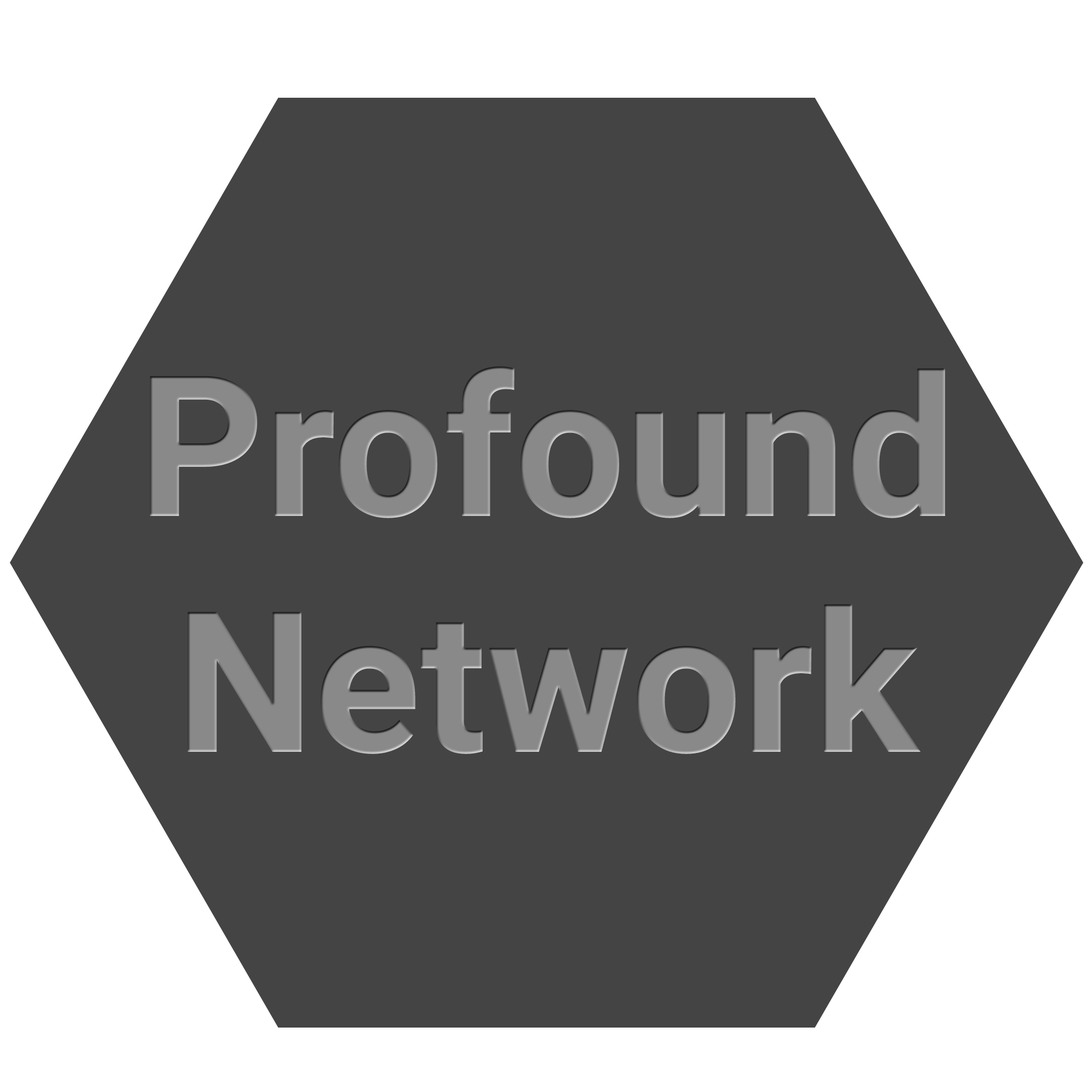
<style>
.page{position:relative;width:1092px;height:1092px;background:#444444}
.page>*{position:absolute;margin:0}
.t1{font:196.7px "Roboto-Bold";color:#898989}
</style>
<div class="page">
<p class="t1" style="left:150px;top:366px;width:795px;height:388px;text-align:center">Profound<br>Network</p>
</div>
